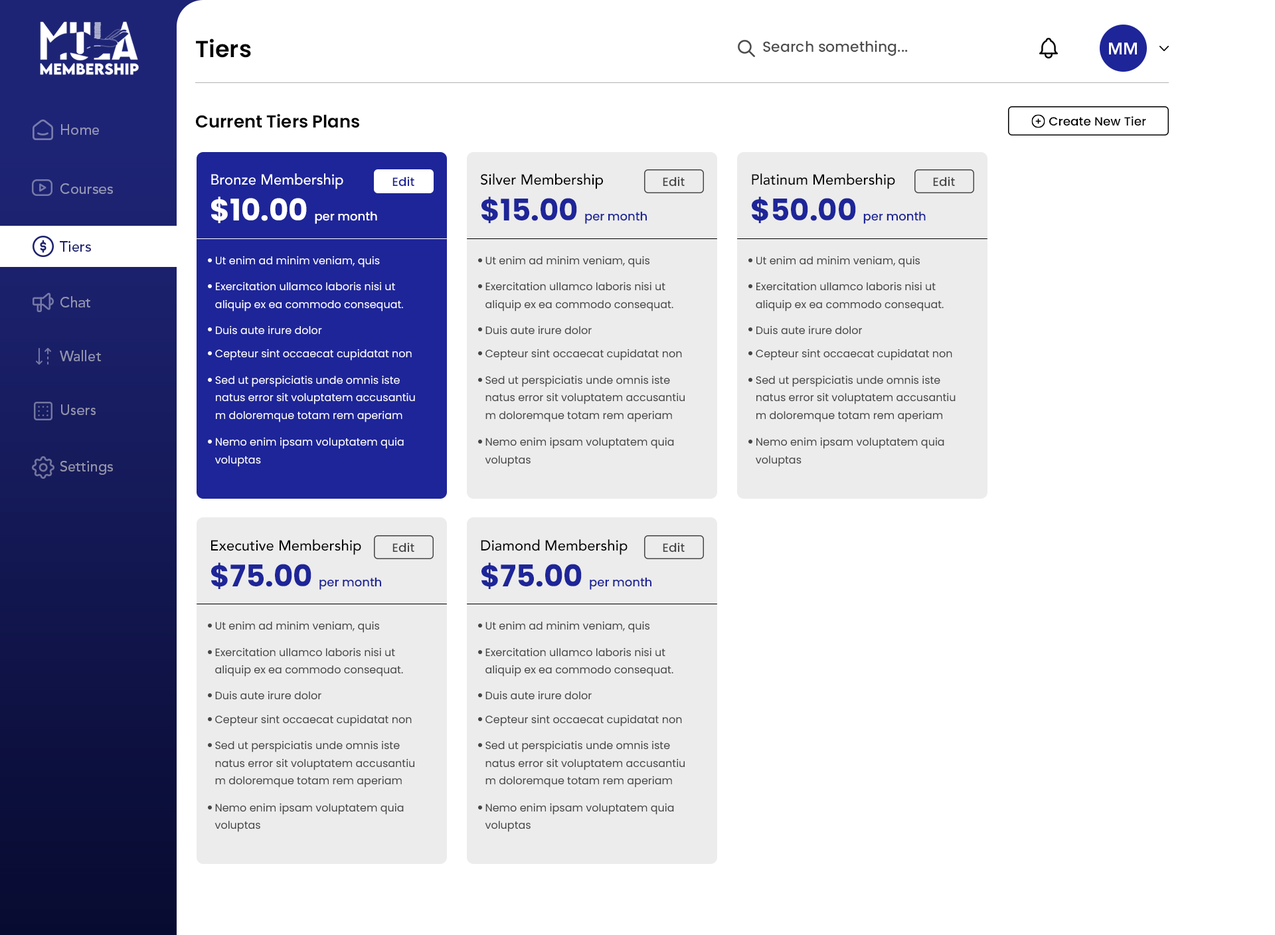
<style>
.page{position:relative;width:1275px;height:935px;background:#ffffff}
.page>*{position:absolute;margin:0}
.t1{font:23.2px "Poppins-SemiBold";color:#000000}
.t2{font:14.6px "Poppins-Medium";color:#4c4c4c}
.t3{font:16.6px "AvenirLTPro-Heavy";color:#ffffff}
.t4{font:17.3px "Poppins-SemiBold";color:#000000}
.t5{font:14.6px "AvenirLTPro-Medium";color:#9495b4}
.t6{font:12px "Poppins-Medium";color:#000000}
.t7{font:14.6px "AvenirLTPro-Medium";color:#ffffff}
.t8{font:14.6px "AvenirLTPro-Medium";color:#000000}
.t9{font:14.6px "AvenirLTPro-Medium";color:#9395b3}
.t10{font:12px "Poppins-Medium";color:#1e2598}
.t11{font:12px "Poppins-Medium";color:#464646}
.t12{font:12px "Poppins-Medium";color:#ffffff}
.t13{font:29.9px "Poppins-Bold";color:#ffffff}
.t14{font:29.9px "Poppins-Bold";color:#1e2598}
.t15{font:14.6px "AvenirLTPro-Medium";color:#1d2270}
.t16{font:10.6px "Poppins-Regular";color:#ffffff}
.t17{font:10.6px "Poppins-Regular";color:#464646}
.t18{font:10.6px/17.5px "Poppins-Regular";color:#ffffff}
.t19{font:10.6px/17.5px "Poppins-Regular";color:#464646}
.t20{font:14.6px "AvenirLTPro-Medium";color:#9394af}
.t21{font:14.6px "AvenirLTPro-Medium";color:#9294ad}
.t22{font:14.6px "AvenirLTPro-Medium";color:#9293ab}
.t23{font:14.6px "AvenirLTPro-Medium";color:#9293a9}
</style>
<div class="page">
<p class="t1" style="left:196px;top:39px;width:55px;height:19px">Tiers</p>
<p class="t2" style="left:763px;top:41px;width:145px;height:15px">Search something...</p>
<p class="t3" style="left:1109px;top:43px;width:28px;height:11px">MM</p>
<p class="t4" style="left:196px;top:114px;width:163px;height:14px">Current Tiers Plans</p>
<p class="t5" style="left:61px;top:124px;width:38px;height:11px">Home</p>
<p class="t6" style="left:1049px;top:116px;width:97px;height:10px">Create New Tier</p>
<p class="t7" style="left:211px;top:173px;width:132px;height:16px">Bronze Membership</p>
<p class="t8" style="left:480px;top:173px;width:123px;height:16px">Silver Membership</p>
<p class="t8" style="left:752px;top:173px;width:143px;height:16px">Platinum Membership</p>
<p class="t9" style="left:60px;top:183px;width:53px;height:11px">Courses</p>
<p class="t10" style="left:393px;top:177px;width:21px;height:10px">Edit</p>
<p class="t11" style="left:663px;top:177px;width:22px;height:10px">Edit</p>
<p class="t11" style="left:933px;top:177px;width:22px;height:10px">Edit</p>
<p class="t12" style="left:211px;top:197px;width:166px;height:27px"><span class="t13">$10.00 </span>per month</p>
<p class="t10" style="left:482px;top:197px;width:165px;height:27px"><span class="t14">$15.00 </span>per month</p>
<p class="t10" style="left:752px;top:197px;width:174px;height:27px"><span class="t14">$50.00 </span>per month</p>
<p class="t15" style="left:60px;top:241px;width:31px;height:11px">Tiers</p>
<p class="t16" style="left:216px;top:256px;width:164px;height:12px">Ut enim ad minim veniam, quis</p>
<p class="t17" style="left:485px;top:256px;width:165px;height:12px">Ut enim ad minim veniam, quis</p>
<p class="t17" style="left:756px;top:256px;width:164px;height:12px">Ut enim ad minim veniam, quis</p>
<p class="t18" style="left:215px;top:282px;width:188px;height:29px">Exercitation ullamco laboris nisi ut <br>aliquip ex ea commodo consequat.</p>
<p class="t19" style="left:485px;top:282px;width:188px;height:29px">Exercitation ullamco laboris nisi ut <br>aliquip ex ea commodo consequat.</p>
<p class="t19" style="left:756px;top:282px;width:188px;height:29px">Exercitation ullamco laboris nisi ut <br>aliquip ex ea commodo consequat.</p>
<p class="t20" style="left:60px;top:296px;width:30px;height:12px">Chat</p>
<p class="t16" style="left:216px;top:325px;width:106px;height:10px">Duis aute irure dolor</p>
<p class="t17" style="left:485px;top:325px;width:107px;height:10px">Duis aute irure dolor</p>
<p class="t17" style="left:756px;top:325px;width:106px;height:10px">Duis aute irure dolor</p>
<p class="t21" style="left:60px;top:350px;width:41px;height:11px">Wallet</p>
<p class="t16" style="left:215px;top:349px;width:197px;height:12px">Cepteur sint occaecat cupidatat non</p>
<p class="t17" style="left:485px;top:349px;width:197px;height:12px">Cepteur sint occaecat cupidatat non</p>
<p class="t17" style="left:756px;top:349px;width:196px;height:12px">Cepteur sint occaecat cupidatat non</p>
<p class="t18" style="left:215px;top:375px;width:200px;height:47px">Sed ut perspiciatis unde omnis iste <br>natus error sit voluptatem accusantiu<br>m doloremque totam rem aperiam</p>
<p class="t19" style="left:485px;top:375px;width:200px;height:47px">Sed ut perspiciatis unde omnis iste <br>natus error sit voluptatem accusantiu<br>m doloremque totam rem aperiam</p>
<p class="t19" style="left:756px;top:375px;width:200px;height:47px">Sed ut perspiciatis unde omnis iste <br>natus error sit voluptatem accusantiu<br>m doloremque totam rem aperiam</p>
<p class="t22" style="left:61px;top:404px;width:35px;height:11px">Users</p>
<p class="t18" style="left:215px;top:437px;width:189px;height:30px">Nemo enim ipsam voluptatem quia<br>voluptas</p>
<p class="t19" style="left:485px;top:437px;width:189px;height:30px">Nemo enim ipsam voluptatem quia<br>voluptas</p>
<p class="t19" style="left:756px;top:437px;width:188px;height:30px">Nemo enim ipsam voluptatem quia<br>voluptas</p>
<p class="t23" style="left:60px;top:461px;width:53px;height:14px">Settings</p>
<p class="t8" style="left:211px;top:539px;width:150px;height:16px">Executive Membership</p>
<p class="t11" style="left:393px;top:543px;width:21px;height:10px">Edit</p>
<p class="t8" style="left:481px;top:539px;width:147px;height:16px">Diamond Membership</p>
<p class="t11" style="left:663px;top:543px;width:22px;height:10px">Edit</p>
<p class="t10" style="left:211px;top:563px;width:170px;height:27px"><span class="t14">$75.00 </span>per month</p>
<p class="t10" style="left:482px;top:563px;width:170px;height:27px"><span class="t14">$75.00 </span>per month</p>
<p class="t17" style="left:215px;top:621px;width:164px;height:12px">Ut enim ad minim veniam, quis</p>
<p class="t17" style="left:485px;top:621px;width:165px;height:12px">Ut enim ad minim veniam, quis</p>
<p class="t19" style="left:215px;top:648px;width:188px;height:29px">Exercitation ullamco laboris nisi ut <br>aliquip ex ea commodo consequat.</p>
<p class="t19" style="left:485px;top:648px;width:188px;height:29px">Exercitation ullamco laboris nisi ut <br>aliquip ex ea commodo consequat.</p>
<p class="t17" style="left:215px;top:691px;width:106px;height:9px">Duis aute irure dolor</p>
<p class="t17" style="left:485px;top:691px;width:107px;height:9px">Duis aute irure dolor</p>
<p class="t17" style="left:215px;top:715px;width:197px;height:12px">Cepteur sint occaecat cupidatat non</p>
<p class="t17" style="left:485px;top:715px;width:197px;height:12px">Cepteur sint occaecat cupidatat non</p>
<p class="t19" style="left:215px;top:741px;width:199px;height:47px">Sed ut perspiciatis unde omnis iste <br>natus error sit voluptatem accusantiu<br>m doloremque totam rem aperiam</p>
<p class="t19" style="left:485px;top:741px;width:200px;height:47px">Sed ut perspiciatis unde omnis iste <br>natus error sit voluptatem accusantiu<br>m doloremque totam rem aperiam</p>
<p class="t19" style="left:215px;top:803px;width:189px;height:29px">Nemo enim ipsam voluptatem quia<br>voluptas</p>
<p class="t19" style="left:485px;top:803px;width:189px;height:29px">Nemo enim ipsam voluptatem quia<br>voluptas</p>
</div>
